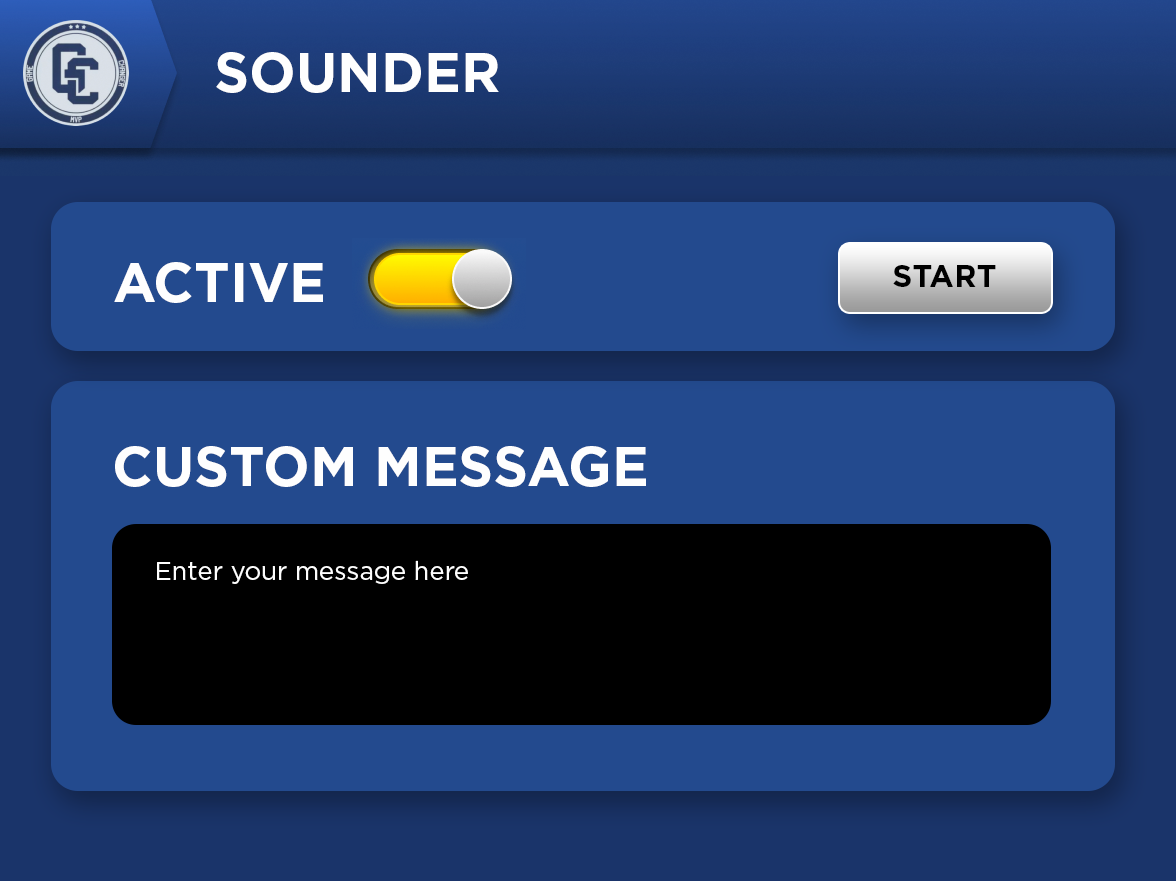
<style>
.page{position:relative;width:1176px;height:881px;background:#234a8e}
.page>*{position:absolute;margin:0}
.t1{font:55px "Gotham-Bold";color:#fefefe}
.t2{font:31.1px "Gotham-Bold";color:#000000}
.t3{font:25.5px "Gotham-Book";color:#fefefe}
</style>
<div class="page">
<p class="t1" style="left:216px;top:52px;width:283px;height:41px">SOUNDER</p>
<p class="t1" style="left:114px;top:262px;width:209px;height:41px">ACTIVE</p>
<p class="t2" style="left:893px;top:265px;width:103px;height:22px">START</p>
<p class="t1" style="left:115px;top:446px;width:531px;height:41px">CUSTOM MESSAGE</p>
<p class="t3" style="left:157px;top:560px;width:311px;height:24px">Enter your message here</p>
</div>
